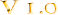
<style>
.page{position:relative;width:58px;height:15px;background:#ffffff}
.page>*{position:absolute;margin:0}
.t1{font:21.8px "RingbearerMedium";scale:1.29 1}
.t2{font:21.8px "MyriadPro-Regular";scale:1.29 1}
</style>
<div class="page">
<p class="t1" style="left:0px;top:0px;width:58px;height:15px">v 1<span class="t2">.</span>0</p>
</div>
